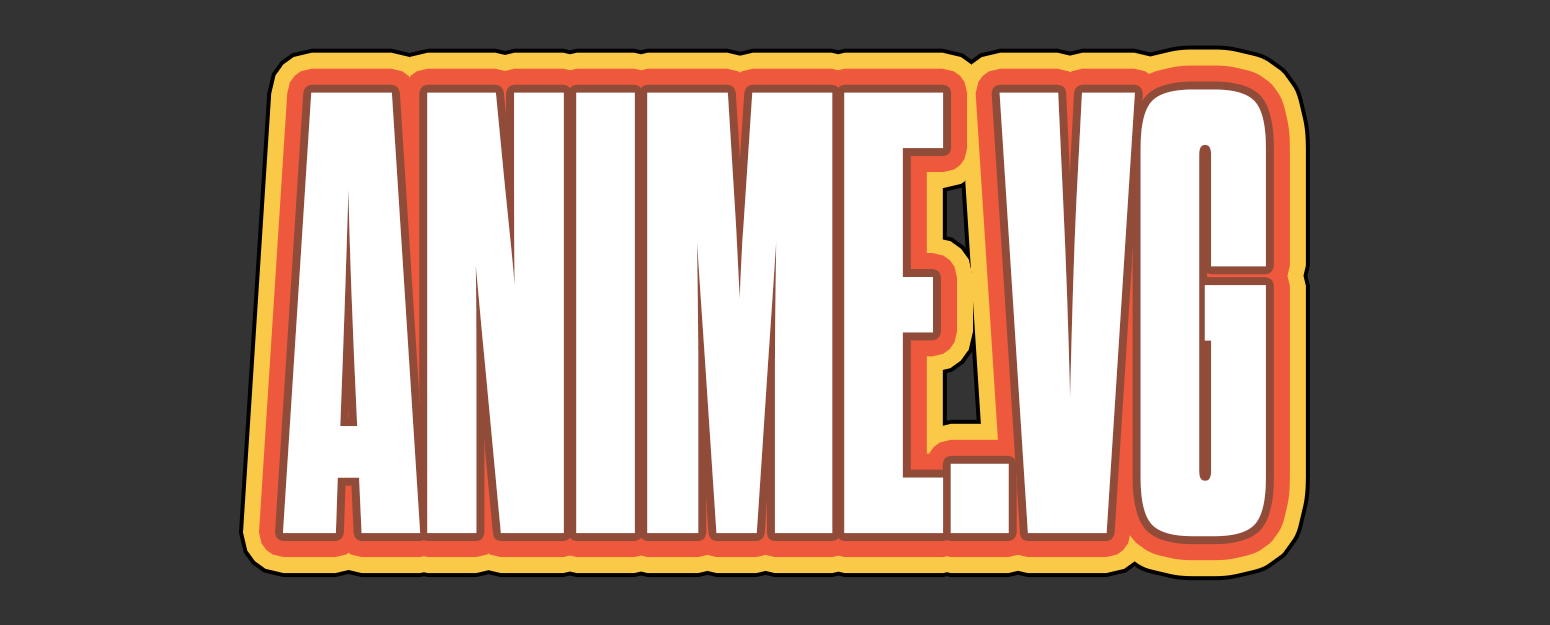
<style>
.page{position:relative;width:1550px;height:625px;background:#333333}
.page>*{position:absolute;margin:0}
.t1{font:629px "DharmaGothicC-Heavy";color:#ffffff}
</style>
<div class="page">
<p class="t1" style="left:283px;top:89px;width:983px;height:448px">ANIME.VG</p>
</div>
